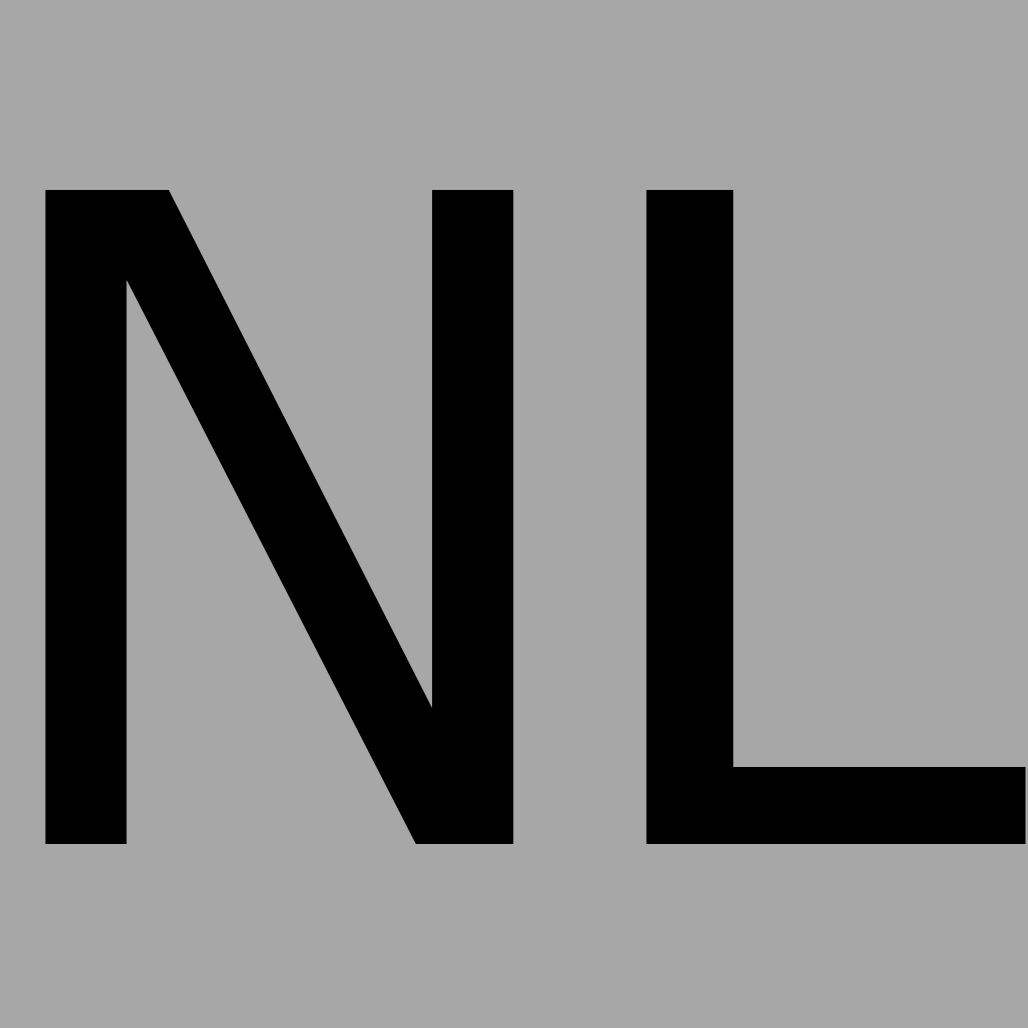
<style>
.page{position:relative;width:1028px;height:1028px;background:#a7a7a7}
.page>*{position:absolute;margin:0}
.t1{font:900px "Tahoma";color:#000000}
</style>
<div class="page">
<p class="t1" style="left:45px;top:189px;width:981px;height:655px">NL</p>
</div>
